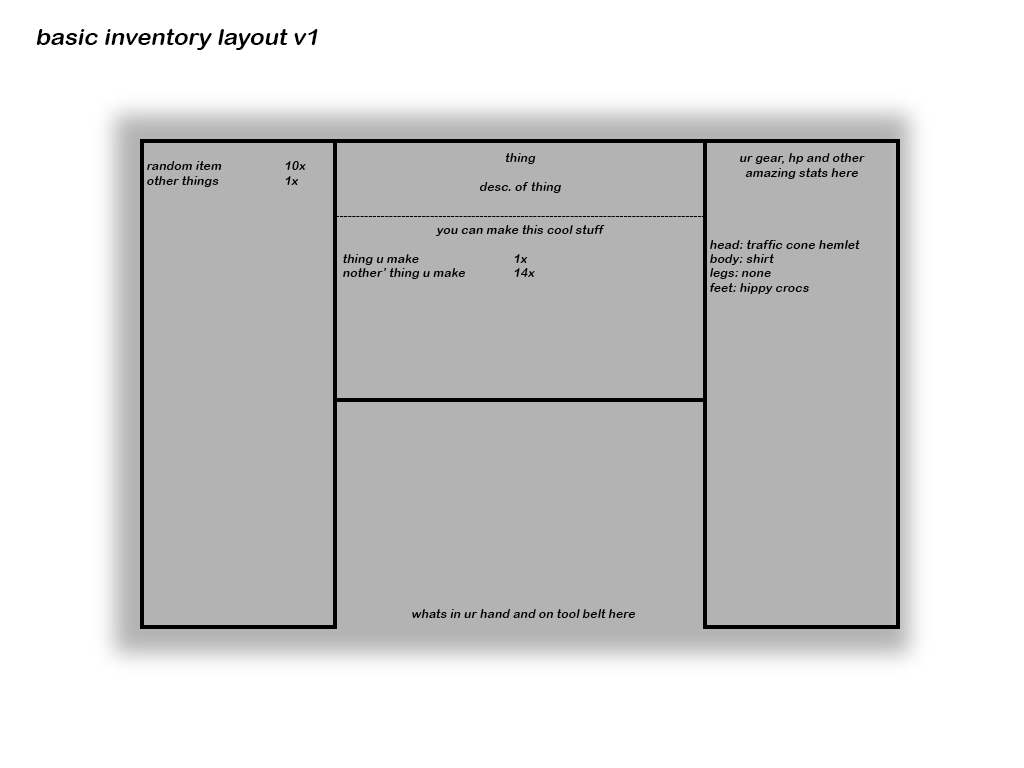
<style>
.page{position:relative;width:1024px;height:768px;background:#b3b3b3}
.page>*{position:absolute;margin:0}
.t1{font:23px "ArialRoundedMTBold";color:#000000;font-style:italic;scale:1.03 1}
.t2{font:12px "ArialRoundedMTBold";color:#000000;font-style:italic;scale:1.03 1}
</style>
<div class="page">
<p class="t1" style="left:36px;top:29px;width:282px;height:21px">basic inventory layout v1</p>
<p class="t2" style="left:147px;top:161px;width:159px;height:26px;text-align:center"><span class="t1"><br></span>  random item  10x<br>  other things  1x</p>
<p class="t2" style="left:335px;top:153px;width:371px;height:126px">thing<br><br>desc. of thing<br><br>------------------------------------------------------------------------------------------<br>you can make this cool stuff<br><br>   thing u make   1x<br>   nother’ thing u make  14x</p>
<p class="t2" style="left:710px;top:153px;width:155px;height:141px;text-align:center">ur gear, hp and other<br>amazing stats here<br><br><br><br><br>  head: traffic cone hemlet<br>  body: shirt<br>  legs: none<br>  feet: hippy crocs</p>
<p class="t2" style="left:412px;top:609px;width:223px;height:9px">whats in ur hand and on tool belt here</p>
</div>
